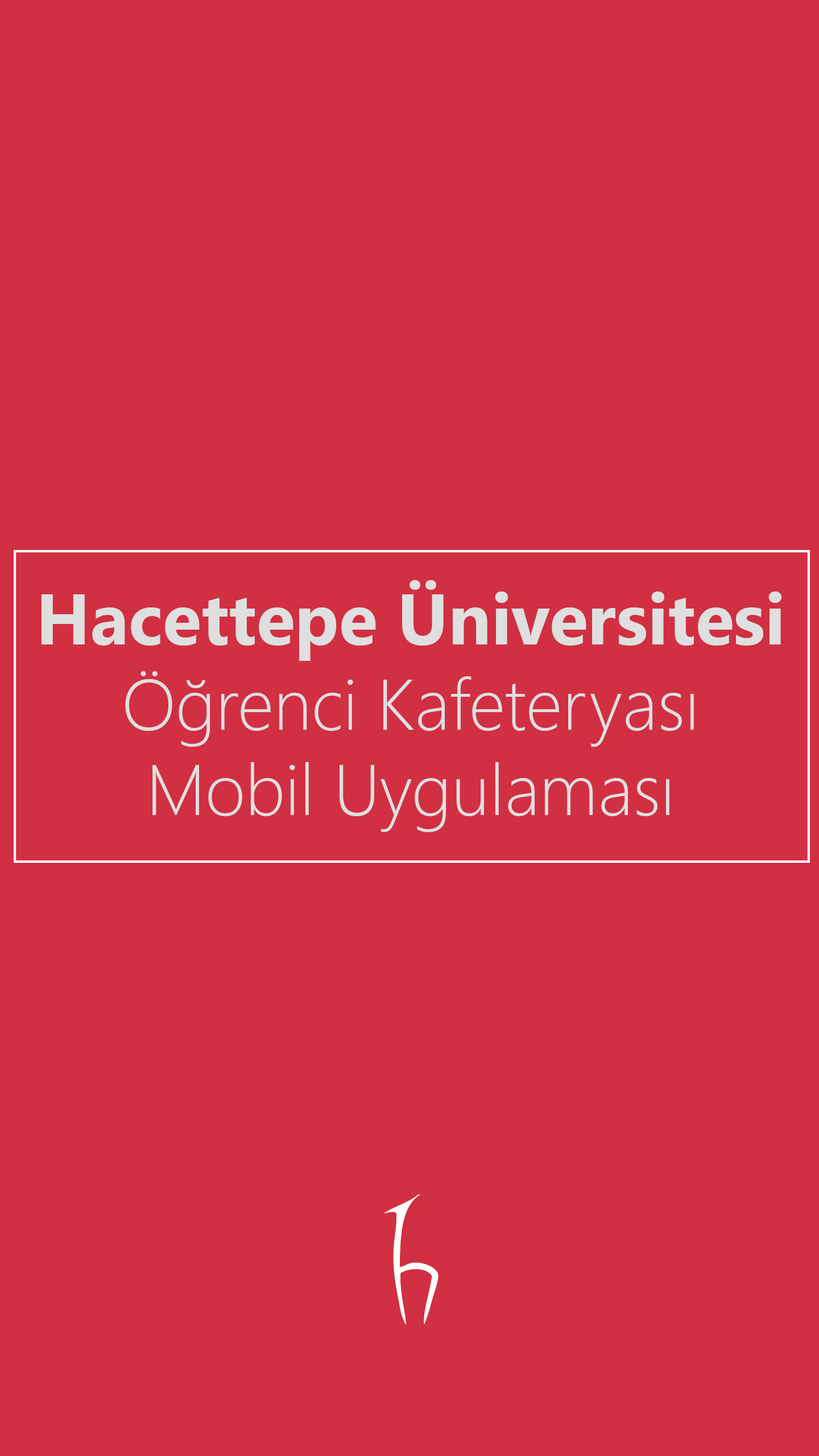
<style>
.page{position:relative;width:819px;height:1456px;background:#d12f42}
.page>*{position:absolute;margin:0}
.t1{font:71.1px "SegoeUI-Light";color:#dfdfdf}
.t2{font:71.1px "SegoeUI-Bold";color:#dfdfdf}
</style>
<div class="page">
<p class="t1" style="left:41px;top:580px;width:740px;height:252px;text-align:center"><span class="t2">Hacettepe Üniversitesi<br></span>Öğrenci Kafeteryası<br>Mobil Uygulaması</p>
</div>
